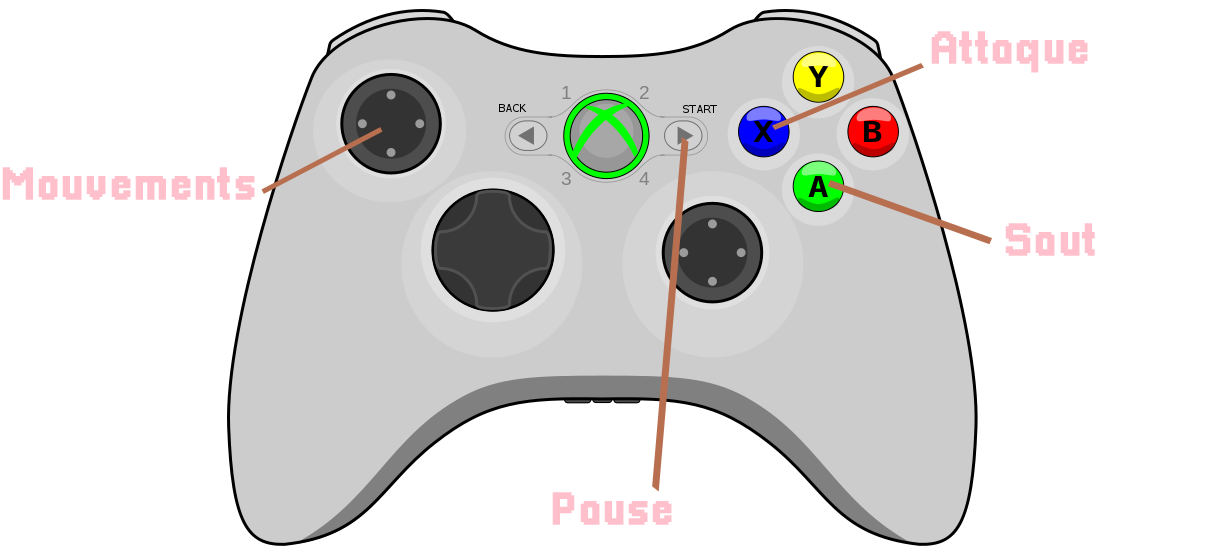
<style>
.page{position:relative;width:1209px;height:555px;background:#ffffff}
.page>*{position:absolute;margin:0}
.t1{font:46px "Pixellari";color:#ffc0cb;font-weight:bold}
</style>
<div class="page">
<p class="t1" style="left:931px;top:31px;width:157px;height:42px">Attaque</p>
<p class="t1" style="left:2px;top:167px;width:253px;height:33px">Mouvements</p>
<p class="t1" style="left:1005px;top:223px;width:90px;height:33px">Saut</p>
<p class="t1" style="left:552px;top:492px;width:120px;height:33px">Pause</p>
</div>
